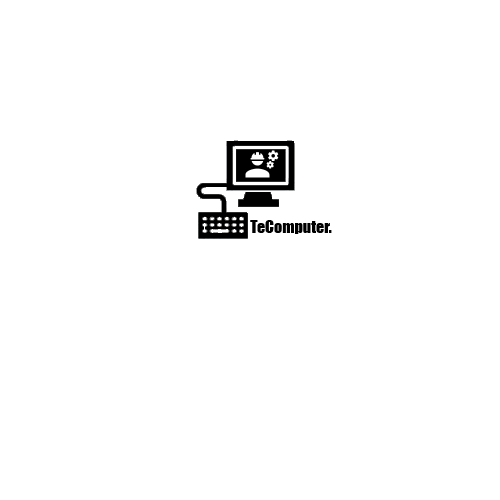
<style>
.page{position:relative;width:500px;height:500px;background:#ffffff}
.page>*{position:absolute;margin:0}
.t1{font:16px "Impact";color:#000000}
</style>
<div class="page">
<p class="t1" style="left:250px;top:220px;width:82px;height:14px">TeComputer.</p>
</div>
